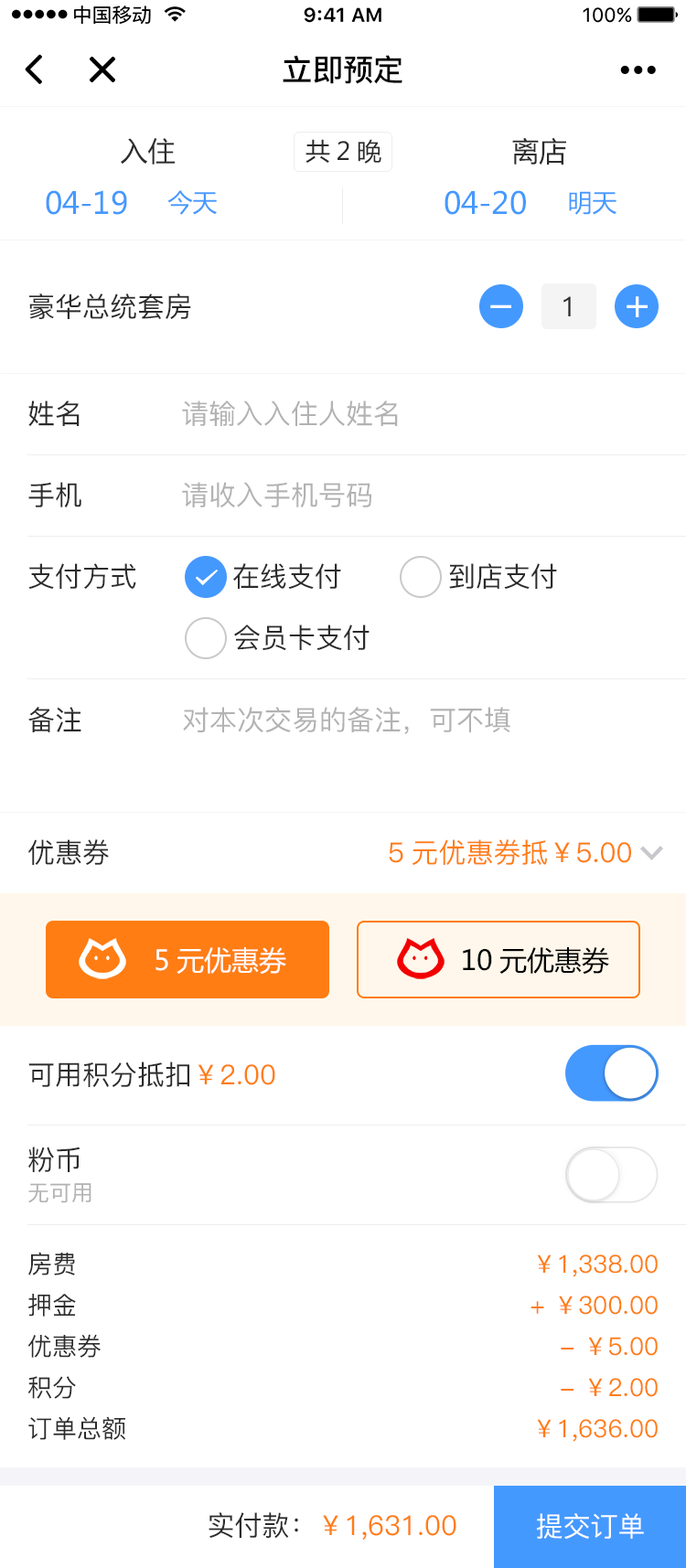
<style>
.page{position:relative;width:686px;height:1568px;background:#ffffff}
.page>*{position:absolute;margin:0}
.t1{font:30.4px "PingFang-SC-Bold";color:#000000}
.t2{font:27.4px "MicrosoftYaHei";color:#2b2b2b}
.t3{font:24.7px "MicrosoftYaHei";color:#2b2b2b}
.t4{font:30.2px "MicrosoftYaHei";color:#4499ff}
.t5{font:24.7px "MicrosoftYaHei";color:#4499ff}
.t6{font:27.4px "PingFang-SC-Medium";color:#2b2b2b}
.t7{font:27.4px "PingFang-SC-Medium";color:#b2b2b2}
.t8{font:27.4px "PingFang-SC-Medium";color:#ff7d13}
.t9{font:27.4px "MicrosoftYaHei";color:#ffffff}
.t10{font:27.4px "MicrosoftYaHei";color:#000000}
.t11{font:21.9px "PingFang-SC-Medium";color:#b2b2b2}
.t12{font:24.7px "PingFang-SC-Medium";color:#2b2b2b}
.t13{font:24.7px "PingFang-SC-Medium";color:#ff7d13}
.t14{font:27.4px "PingFang-SC-Medium";color:#ffffff}
</style>
<div class="page">
<p class="t1" style="left:283px;top:55px;width:119px;height:29px">立即预定</p>
<p class="t2" style="left:512px;top:137px;width:54px;height:28px">离店</p>
<p class="t2" style="left:121px;top:138px;width:54px;height:27px">入住</p>
<p class="t3" style="left:305px;top:139px;width:76px;height:25px">共2晚</p>
<p class="t4" style="left:46px;top:190px;width:81px;height:25px">04-19</p>
<p class="t5" style="left:167px;top:190px;width:50px;height:25px">今天</p>
<p class="t4" style="left:444px;top:190px;width:82px;height:25px">04-20</p>
<p class="t5" style="left:569px;top:191px;width:47px;height:24px">明天</p>
<p class="t6" style="left:29px;top:293px;width:162px;height:26px">豪华总统套房</p>
<p class="t6" style="left:563px;top:296px;width:8px;height:20px">1</p>
<p class="t6" style="left:28px;top:400px;width:52px;height:26px">姓名</p>
<p class="t7" style="left:182px;top:400px;width:216px;height:26px">请输入入住人姓名</p>
<p class="t6" style="left:28px;top:482px;width:53px;height:25px">手机</p>
<p class="t7" style="left:182px;top:482px;width:189px;height:25px">请收入手机号码</p>
<p class="t6" style="left:28px;top:563px;width:108px;height:26px">支付方式</p>
<p class="t6" style="left:233px;top:563px;width:108px;height:26px">在线支付</p>
<p class="t6" style="left:449px;top:563px;width:108px;height:26px">到店支付</p>
<p class="t6" style="left:234px;top:624px;width:135px;height:27px">会员卡支付</p>
<p class="t6" style="left:28px;top:707px;width:53px;height:25px">备注</p>
<p class="t7" style="left:183px;top:707px;width:327px;height:27px">对本次交易的备注，可不填</p>
<p class="t6" style="left:28px;top:839px;width:81px;height:26px">优惠券</p>
<p class="t8" style="left:389px;top:839px;width:242px;height:26px">5元优惠券抵￥5.00</p>
<p class="t9" style="left:155px;top:947px;width:131px;height:28px">5元优惠券</p>
<p class="t10" style="left:463px;top:947px;width:146px;height:28px">10元优惠券</p>
<p class="t6" style="left:28px;top:1061px;width:247px;height:26px">可用积分抵扣<span class="t8">￥2.00</span></p>
<p class="t6" style="left:28px;top:1147px;width:52px;height:26px">粉币</p>
<p class="t11" style="left:28px;top:1183px;width:63px;height:20px">无可用</p>
<p class="t12" style="left:28px;top:1252px;width:47px;height:23px">房费</p>
<p class="t13" style="left:537px;top:1254px;width:120px;height:23px">￥1,338.00</p>
<p class="t12" style="left:28px;top:1294px;width:48px;height:23px">押金</p>
<p class="t13" style="left:530px;top:1296px;width:127px;height:19px">+ ￥300.00</p>
<p class="t12" style="left:28px;top:1334px;width:73px;height:24px">优惠券</p>
<p class="t13" style="left:560px;top:1337px;width:97px;height:19px">- ￥5.00</p>
<p class="t12" style="left:28px;top:1376px;width:48px;height:23px">积分</p>
<p class="t13" style="left:560px;top:1378px;width:97px;height:19px">- ￥2.00</p>
<p class="t12" style="left:28px;top:1416px;width:97px;height:24px">订单总额</p>
<p class="t13" style="left:537px;top:1419px;width:120px;height:23px">￥1,636.00</p>
<p class="t8" style="left:208px;top:1512px;width:248px;height:28px"><span class="t6">实付款：</span>￥1,631.00</p>
<p class="t14" style="left:536px;top:1513px;width:108px;height:26px">提交订单</p>
</div>
